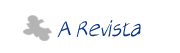
<style>
.page{position:relative;width:180px;height:53px;background:#ffffff}
.page>*{position:absolute;margin:0}
.t1{font:24px "AirCutLight";color:#0b3788}
</style>
<div class="page">
<p class="t1" style="left:57px;top:20px;width:84px;height:18px">A Revista</p>
</div>
